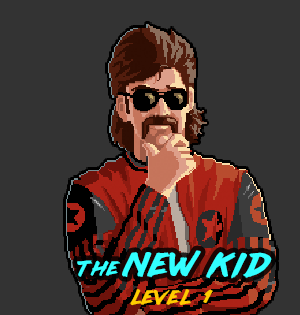
<style>
.page{position:relative;width:300px;height:315px;background:#333333}
.page>*{position:absolute;margin:0}
.t1{font:30px "lazer84";letter-spacing:0.083em;color:#31ffff}
.t2{font:18px "lazer84";letter-spacing:0.083em;color:#31ffff}
.t3{font:18px "lazer84";letter-spacing:0.082em;color:#ffcc00}
</style>
<div class="page">
<p class="t1" style="left:77px;top:250px;width:195px;height:29px"><span class="t2">the </span>New Kid</p>
<p class="t3" style="left:130px;top:289px;width:83px;height:17px">level  1</p>
</div>
